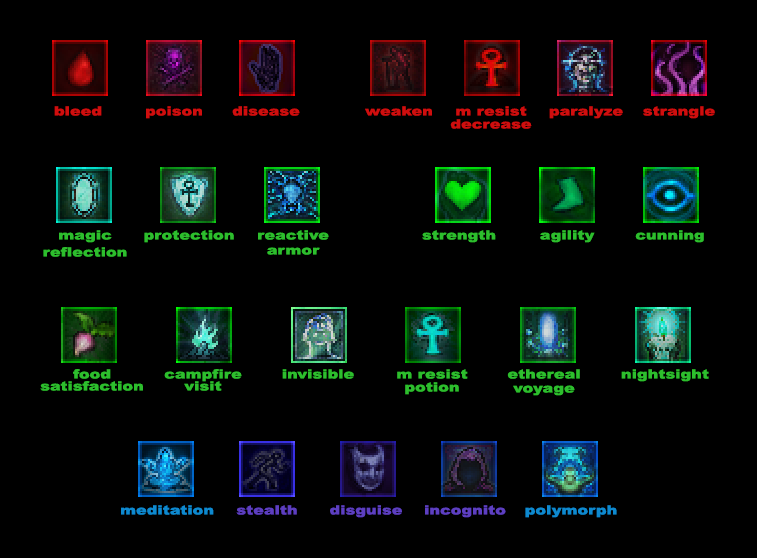
<style>
.page{position:relative;width:757px;height:558px;background:#000000}
.page>*{position:absolute;margin:0}
.t1{font:12.8px "Arial-Black";color:#cf0e0e;scale:1.25 1}
.t2{font:12.8px "Arial-Black";color:#2dbe2d;scale:1.25 1}
.t3{font:12.8px "Arial-Black";color:#0e89cf;scale:1.25 1}
.t4{font:12.8px "Arial-Black";color:#5d3ec0;scale:1.25 1}
.t5{font:12.8px "Arial-Black";color:#5d3fc1;scale:1.25 1}
</style>
<div class="page">
<p class="t1" style="left:54px;top:106px;width:48px;height:10px">bleed</p>
<p class="t1" style="left:146px;top:106px;width:56px;height:13px">poison</p>
<p class="t1" style="left:232px;top:106px;width:68px;height:10px">disease</p>
<p class="t1" style="left:365px;top:106px;width:67px;height:10px">weaken</p>
<p class="t1" style="left:456px;top:106px;width:71px;height:10px">m resist</p>
<p class="t1" style="left:549px;top:106px;width:74px;height:13px">paralyze</p>
<p class="t1" style="left:643px;top:106px;width:72px;height:13px">strangle</p>
<p class="t1" style="left:450px;top:119px;width:82px;height:10px">decrease</p>
<p class="t2" style="left:59px;top:230px;width:53px;height:13px">magic</p>
<p class="t2" style="left:144px;top:230px;width:90px;height:13px">protection</p>
<p class="t2" style="left:258px;top:230px;width:71px;height:10px">reactive</p>
<p class="t2" style="left:422px;top:230px;width:74px;height:13px">strength</p>
<p class="t2" style="left:540px;top:230px;width:55px;height:13px">agility</p>
<p class="t2" style="left:635px;top:230px;width:69px;height:13px">cunning</p>
<p class="t2" style="left:43px;top:247px;width:84px;height:10px">reflection</p>
<p class="t2" style="left:267px;top:247px;width:53px;height:8px">armor</p>
<p class="t2" style="left:73px;top:369px;width:38px;height:10px">food</p>
<p class="t2" style="left:164px;top:369px;width:78px;height:13px">campfire</p>
<p class="t2" style="left:282px;top:369px;width:72px;height:10px">invisible</p>
<p class="t2" style="left:397px;top:369px;width:71px;height:10px">m resist</p>
<p class="t2" style="left:507px;top:369px;width:73px;height:10px">ethereal</p>
<p class="t2" style="left:621px;top:369px;width:88px;height:13px">nightsight</p>
<p class="t2" style="left:40px;top:381px;width:103px;height:10px">satisfaction</p>
<p class="t2" style="left:184px;top:381px;width:38px;height:10px">visit</p>
<p class="t2" style="left:405px;top:382px;width:54px;height:13px">potion</p>
<p class="t2" style="left:513px;top:385px;width:62px;height:11px">voyage</p>
<p class="t3" style="left:121px;top:505px;width:93px;height:10px">meditation</p>
<p class="t4" style="left:236px;top:505px;width:61px;height:10px">stealth</p>
<p class="t5" style="left:330px;top:505px;width:72px;height:13px">disguise</p>
<p class="t5" style="left:425px;top:505px;width:81px;height:13px">incognito</p>
<p class="t3" style="left:525px;top:505px;width:92px;height:13px">polymorph</p>
</div>
